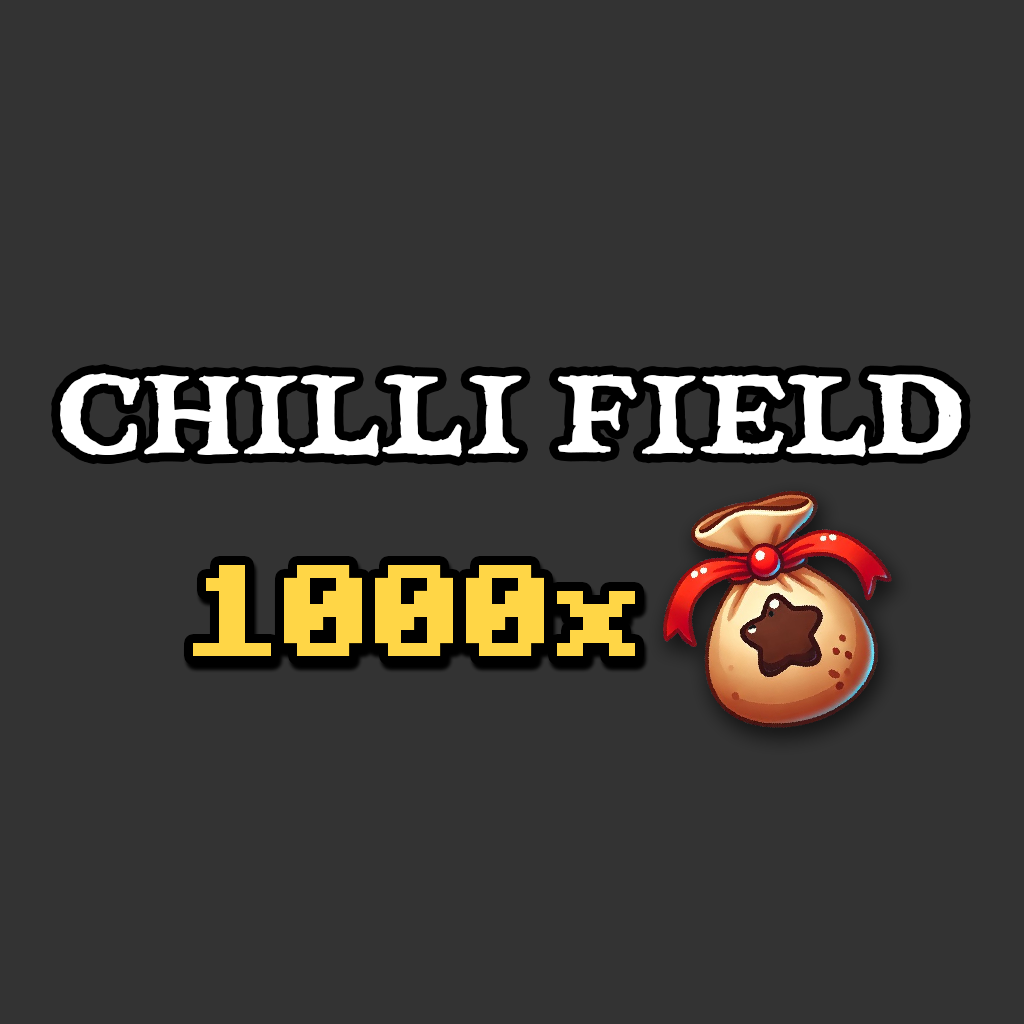
<style>
.page{position:relative;width:1024px;height:1024px;background:#333333}
.page>*{position:absolute;margin:0}
.t1{font:110.5px "treasuremap";color:#ffffff}
.t2{font:130px "Minecraft-Bold";color:#ffd646}
</style>
<div class="page">
<p class="t1" style="left:60px;top:373px;width:902px;height:84px">CHILLI FIELD</p>
<p class="t2" style="left:193px;top:565px;width:442px;height:91px">1000x</p>
</div>
